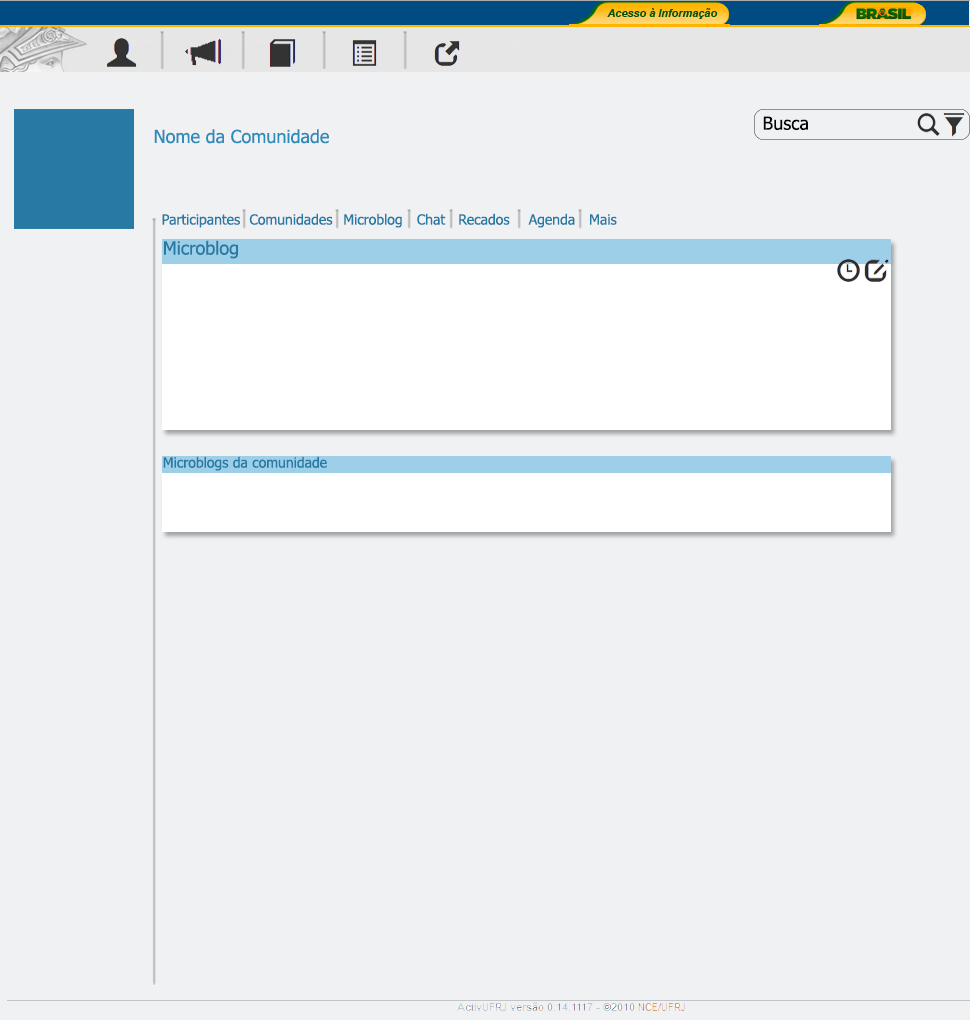
<style>
.page{position:relative;width:970px;height:1020px;background:#eff1f3}
.page>*{position:absolute;margin:0}
.t1{font:18px "Tahoma";color:#040404}
.t2{font:18px "Tahoma";color:#2e8cbd}
.t3{font:14px "Tahoma";color:#2879a3}
.t4{font:18px "Tahoma";color:#2879a3}
</style>
<div class="page">
<p class="t1" style="left:763px;top:116px;width:45px;height:15px">Busca</p>
<p class="t2" style="left:154px;top:129px;width:175px;height:15px">Nome da Comunidade</p>
<p class="t3" style="left:162px;top:214px;width:78px;height:14px">Participantes</p>
<p class="t3" style="left:249px;top:213px;width:84px;height:12px">Comunidades</p>
<p class="t3" style="left:344px;top:213px;width:58px;height:15px">Microblog</p>
<p class="t3" style="left:417px;top:213px;width:29px;height:12px">Chat</p>
<p class="t3" style="left:459px;top:213px;width:51px;height:12px">Recados</p>
<p class="t3" style="left:528px;top:213px;width:47px;height:15px">Agenda</p>
<p class="t3" style="left:590px;top:214px;width:27px;height:11px">Mais</p>
<p class="t4" style="left:164px;top:240px;width:74px;height:19px">Microblog</p>
<p class="t3" style="left:163px;top:456px;width:164px;height:15px">Microblogs da comunidade</p>
</div>
